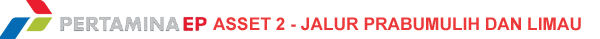
<style>
.page{position:relative;width:600px;height:39px;background:#ffffff}
.page>*{position:absolute;margin:0}
.t1{font:17.3px "Arial-BoldMT";color:#ec3838}
</style>
<div class="page">
<p class="t1" style="left:213px;top:17px;width:368px;height:14px">ASSET 2 - JALUR PRABUMULIH DAN LIMAU</p>
</div>
